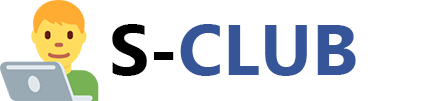
<style>
.page{position:relative;width:435px;height:101px;background:#ffffff}
.page>*{position:absolute;margin:0}
.t1{font:72px "Ebrima-Bold";color:#365599}
.t2{font:72px "Ebrima-Bold";color:#000000}
</style>
<div class="page">
<p class="t1" style="left:112px;top:24px;width:244px;height:52px">S-CLUB</p>
<p class="t1" style="left:112px;top:24px;width:244px;height:52px"><span class="t2">S-</span>CLUB</p>
</div>
